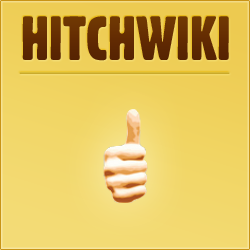
<style>
.page{position:relative;width:250px;height:250px}
.page>*{position:absolute;margin:0}
.t1{font:60.8px "Gothic821CondensedBT-Regular";color:#632b02;text-transform:uppercase}
</style>
<div class="page">
<p class="t1" style="left:22px;top:16px;width:207px;height:45px">Hitchwiki</p>
</div>
